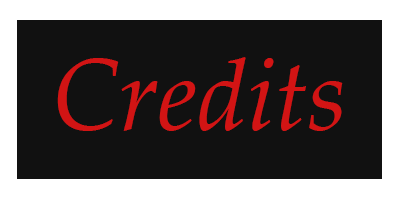
<style>
.page{position:relative;width:400px;height:200px;background:#111111}
.page>*{position:absolute;margin:0}
.t1{font:100px "PalatinoLinotype-Italic";color:#d21414}
</style>
<div class="page">
<p class="t1" style="left:57px;top:57px;width:286px;height:74px">Credits</p>
</div>
